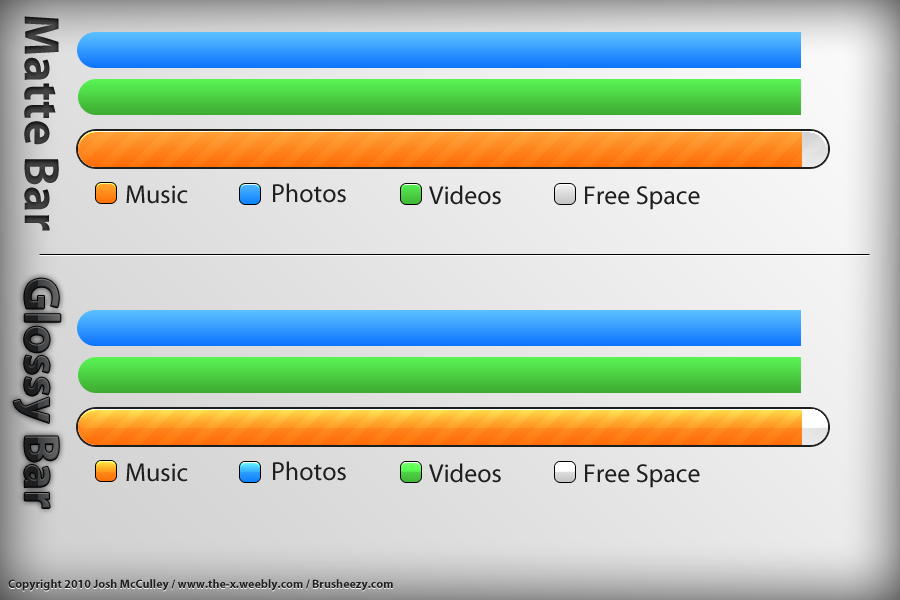
<style>
.page{position:relative;width:900px;height:600px}
.page>*{position:absolute;margin:0}
.t1{font:26px "MyriadPro-Regular";color:#1f1f1f}
</style>
<div class="page">
<p class="t1" style="left:126px;top:185px;width:62px;height:19px">Music</p>
<p class="t1" style="left:273px;top:183px;width:73px;height:20px">Photos</p>
<p class="t1" style="left:429px;top:185px;width:72px;height:20px">Videos</p>
<p class="t1" style="left:585px;top:186px;width:115px;height:24px">Free Space</p>
<p class="t1" style="left:273px;top:461px;width:73px;height:20px">Photos</p>
<p class="t1" style="left:126px;top:463px;width:62px;height:19px">Music</p>
<p class="t1" style="left:429px;top:463px;width:72px;height:20px">Videos</p>
<p class="t1" style="left:585px;top:464px;width:115px;height:24px">Free Space</p>
</div>
